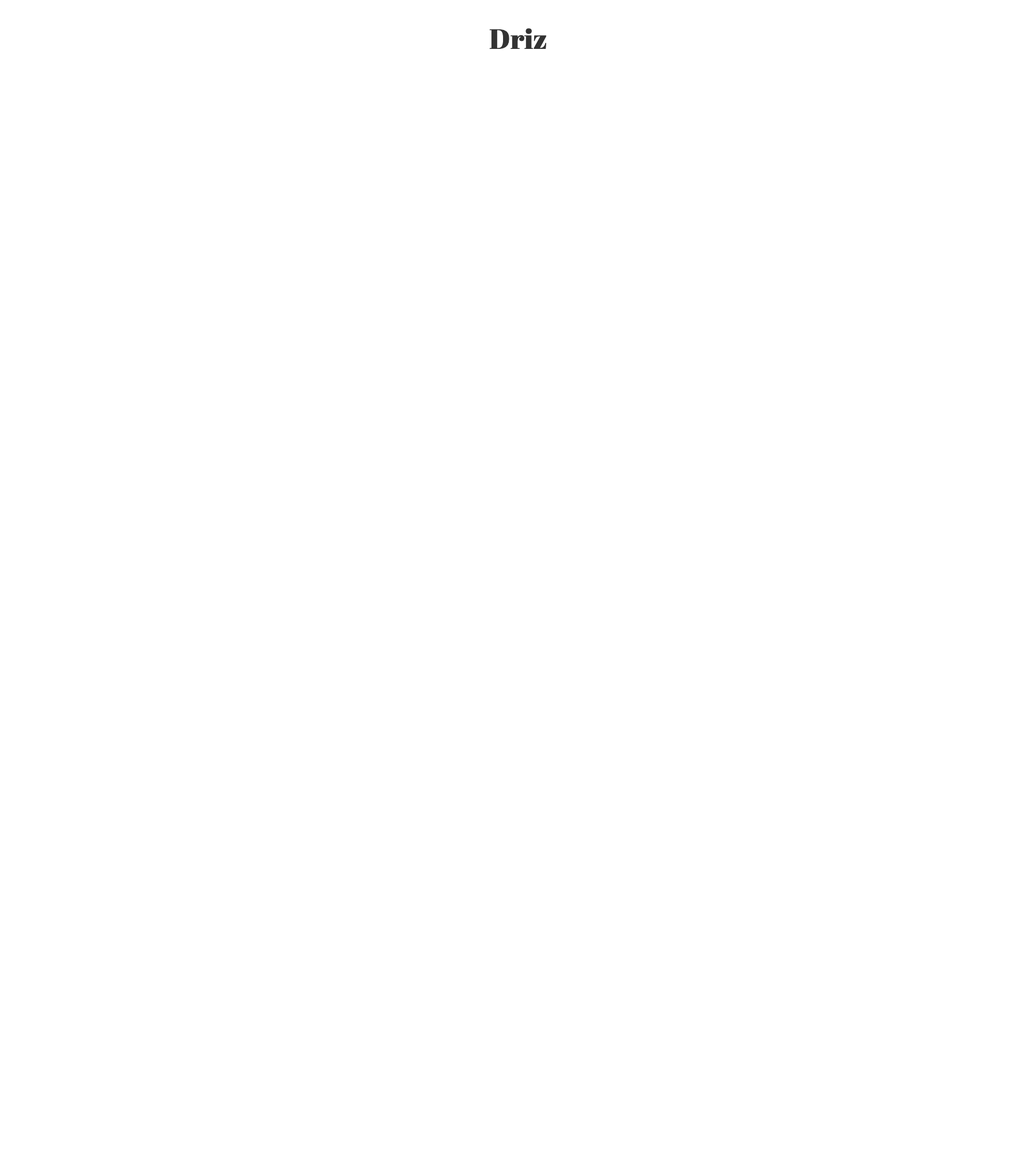
<style>
.page{position:relative;width:1036px;height:1151px;background:#ffffff}
.page>*{position:absolute;margin:0}
.t1{font:27.6px "AbrilFatface-Regular";letter-spacing:0.005em;color:#333333}
</style>
<div class="page">
<p class="t1" style="left:489px;top:28px;width:58px;height:21px">Driz</p>
</div>
